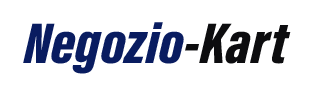
<style>
.page{position:relative;width:312px;height:96px;background:#ffffff}
.page>*{position:absolute;margin:0}
.t1{font:58.7px "AcuminConcept-ExtraCondensedBlackItalic";color:#091c60;font-weight:bold;scale:1.11 1}
.t2{font:58.7px "AcuminConcept-ExtraCondensedBlackItalic";color:#0d0d0f;font-weight:bold;scale:1.11 1}
</style>
<div class="page">
<p class="t1" style="left:23px;top:22px;width:268px;height:52px">Negozio<span class="t2">-Kart</span></p>
</div>
